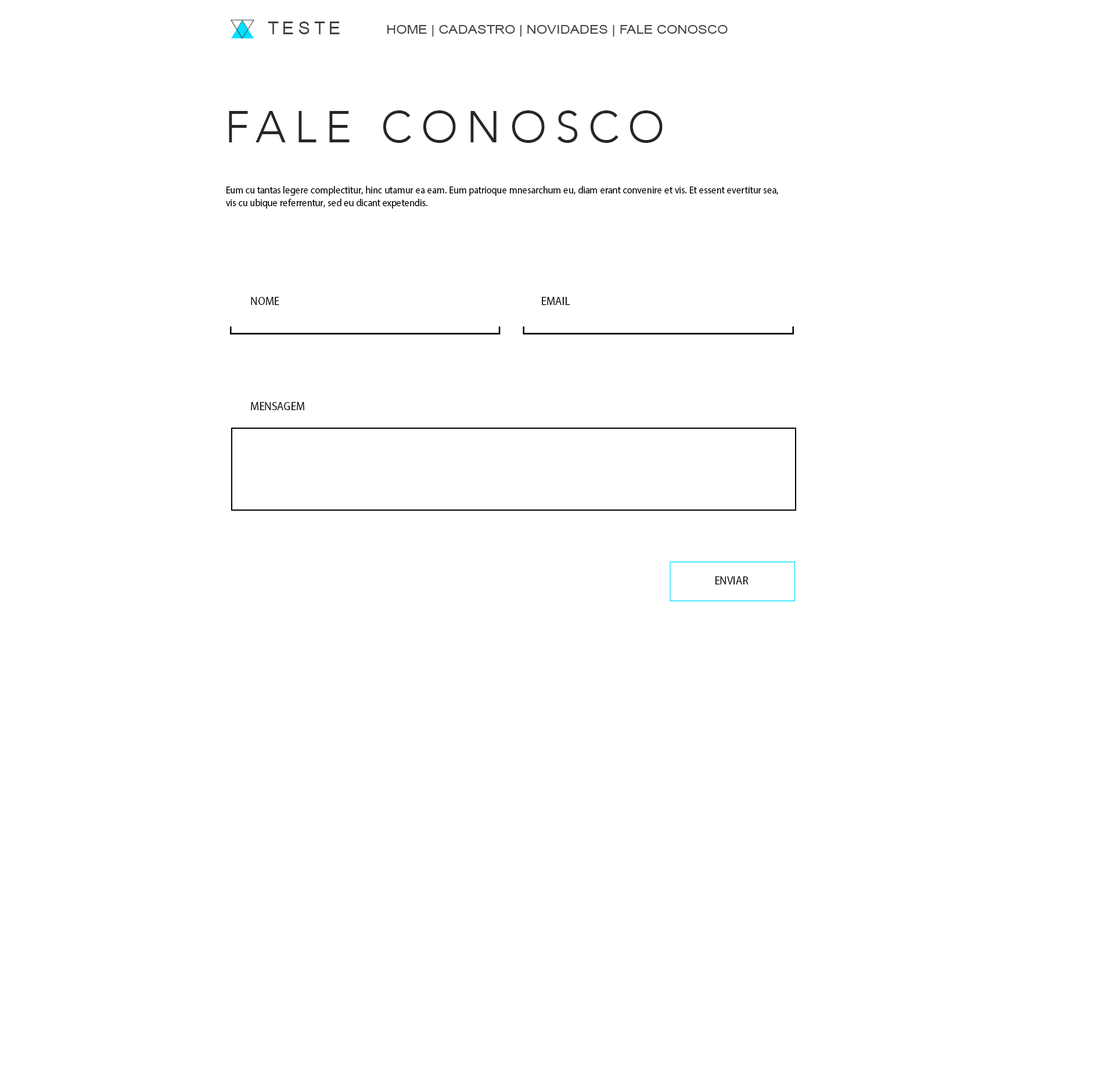
<style>
.page{position:relative;width:1115px;height:1069px;background:#ffffff}
.page>*{position:absolute;margin:0}
.t1{font:18.2px "ArialMT";letter-spacing:0.2em;color:#3f4244}
.t2{font:12.4px "ArialMT";color:#3f4244;scale:1.11 1}
.t3{font:44.1px "Avenir-Light";letter-spacing:0.2em;color:#252726}
.t4{font:10.3px "MyriadPro-Regular";color:#000000;scale:0.92 1}
.t5{font:11.9px "MyriadPro-Regular";color:#000000;scale:0.92 1}
</style>
<div class="page">
<p class="t1" style="left:268px;top:21px;width:72px;height:13px">TESTE</p>
<p class="t2" style="left:387px;top:25px;width:341px;height:12px">HOME | CADASTRO | NOVIDADES | FALE CONOSCO</p>
<p class="t3" style="left:229px;top:110px;width:434px;height:33px">FALE CONOSCO</p>
<p class="t4" style="left:226px;top:186px;width:553px;height:23px">Eum cu tantas legere complectitur, hinc utamur ea eam. Eum patrioque mnesarchum eu, diam erant convenire et vis. Et essent evertitur sea, vis cu ubique referrentur, sed eu dicant expetendis.</p>
<p class="t5" style="left:251px;top:297px;width:28px;height:8px">NOME</p>
<p class="t5" style="left:542px;top:297px;width:29px;height:8px">EMAIL</p>
<p class="t5" style="left:251px;top:402px;width:53px;height:8px">MENSAGEM</p>
<p class="t5" style="left:716px;top:576px;width:33px;height:8px">ENVIAR</p>
</div>
